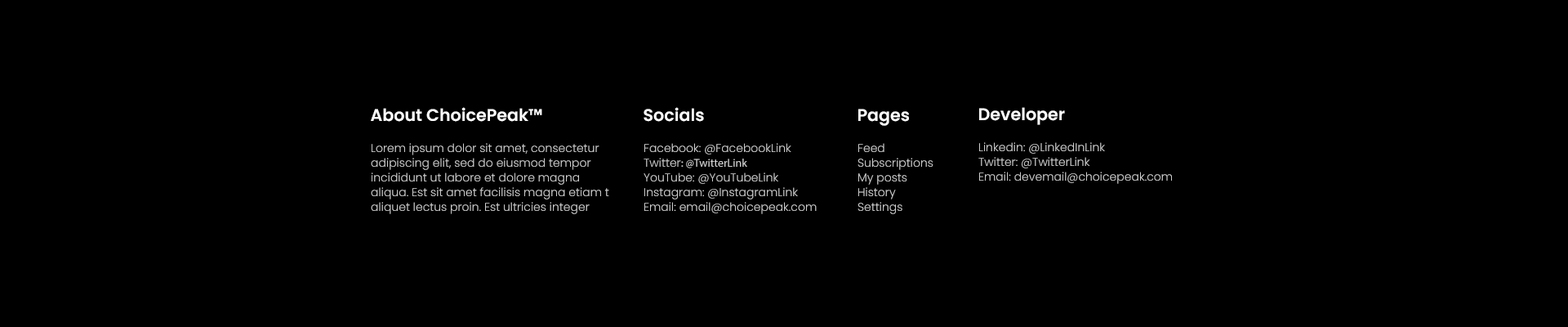
<style>
.page{position:relative;width:1568px;height:327px;background:#000000}
.page>*{position:absolute;margin:0}
.t1{font:16.9px "Poppins-SemiBold";color:#ffffff}
.t2{font:11.4px/14.7px "Poppins-Light";color:#cfcfcf}
.t3{font:11.4px/14.7px "MyriadPro-Regular";color:#cfcfcf}
</style>
<div class="page">
<p class="t1" style="left:371px;top:107px;width:171px;height:15px">About ChoicePeak™</p>
<p class="t1" style="left:644px;top:107px;width:60px;height:15px">Socials</p>
<p class="t1" style="left:858px;top:109px;width:51px;height:17px">Pages</p>
<p class="t1" style="left:979px;top:107px;width:86px;height:18px">Developer</p>
<p class="t2" style="left:371px;top:143px;width:238px;height:71px">Lorem ipsum dolor sit amet, consectetur adipiscing elit, sed do eiusmod tempor incididunt ut labore et dolore magna aliqua. Est sit amet facilisis magna etiam t aliquet lectus proin. Est ultricies integer</p>
<p class="t2" style="left:644px;top:143px;width:173px;height:71px">Facebook: @FacebookLink<br>Twitter<span class="t3">: @TwitterLink<br></span>YouTube: @YouTubeLink<br>Instagram: @InstagramLink<br>Email: email@choicepeak.com</p>
<p class="t2" style="left:858px;top:143px;width:75px;height:71px">Feed<br>Subscriptions<br>My posts<br>History<br>Settings</p>
<p class="t2" style="left:978px;top:142px;width:194px;height:42px">Linkedin: @LinkedInLink<br>Twitter: @TwitterLink<br>Email: devemail@choicepeak.com</p>
</div>
